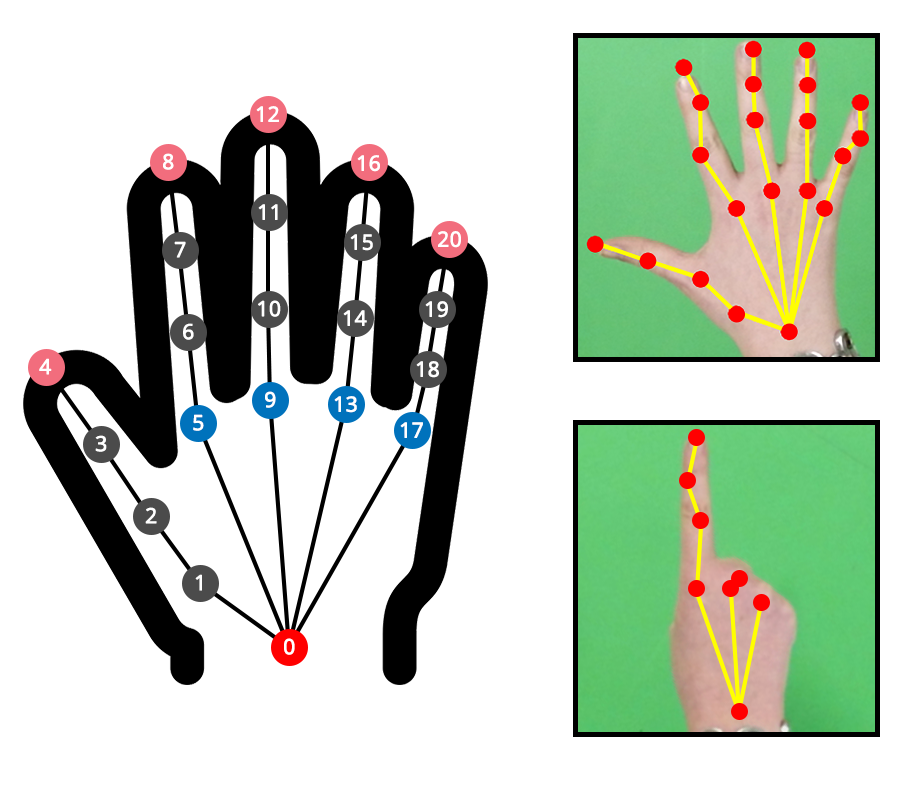
<style>
.page{position:relative;width:924px;height:800px;background:#ffffff}
.page>*{position:absolute;margin:0}
.t1{font:20.8px "OpenSans";color:#ffffff;font-weight:bold}
</style>
<div class="page">
<p class="t1" style="left:256px;top:106px;width:23px;height:16px">12</p>
<p class="t1" style="left:163px;top:153px;width:11px;height:17px">8</p>
<p class="t1" style="left:357px;top:155px;width:23px;height:17px">16</p>
<p class="t1" style="left:258px;top:204px;width:20px;height:16px">11</p>
<p class="t1" style="left:438px;top:231px;width:23px;height:17px">20</p>
<p class="t1" style="left:174px;top:241px;width:12px;height:17px">7</p>
<p class="t1" style="left:350px;top:234px;width:23px;height:17px">15</p>
<p class="t1" style="left:258px;top:300px;width:23px;height:17px">10</p>
<p class="t1" style="left:425px;top:301px;width:23px;height:17px">19</p>
<p class="t1" style="left:343px;top:310px;width:24px;height:16px">14</p>
<p class="t1" style="left:183px;top:323px;width:11px;height:17px">6</p>
<p class="t1" style="left:39px;top:358px;width:13px;height:17px">4</p>
<p class="t1" style="left:416px;top:361px;width:23px;height:17px">18</p>
<p class="t1" style="left:265px;top:391px;width:11px;height:17px">9</p>
<p class="t1" style="left:334px;top:396px;width:23px;height:17px">13</p>
<p class="t1" style="left:193px;top:414px;width:11px;height:17px">5</p>
<p class="t1" style="left:400px;top:422px;width:23px;height:16px">17</p>
<p class="t1" style="left:95px;top:435px;width:12px;height:17px">3</p>
<p class="t1" style="left:145px;top:507px;width:12px;height:17px">2</p>
<p class="t1" style="left:195px;top:574px;width:7px;height:17px">1</p>
<p class="t1" style="left:284px;top:638px;width:11px;height:17px">0</p>
</div>
